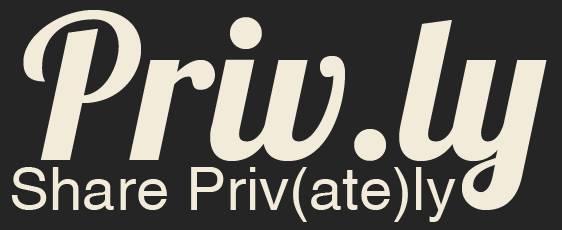
<style>
.page{position:relative;width:562px;height:230px;background:#252525}
.page>*{position:absolute;margin:0}
.t1{font:200px "Lobster1.4";color:#f3ebd9}
.t2{font:60px "Helonia";color:#f3ebd9}
</style>
<div class="page">
<p class="t1" style="left:23px;top:10px;width:524px;height:200px">Priv.ly</p>
<p class="t2" style="left:11px;top:167px;width:445px;height:55px">Share Priv(ate)ly</p>
</div>
